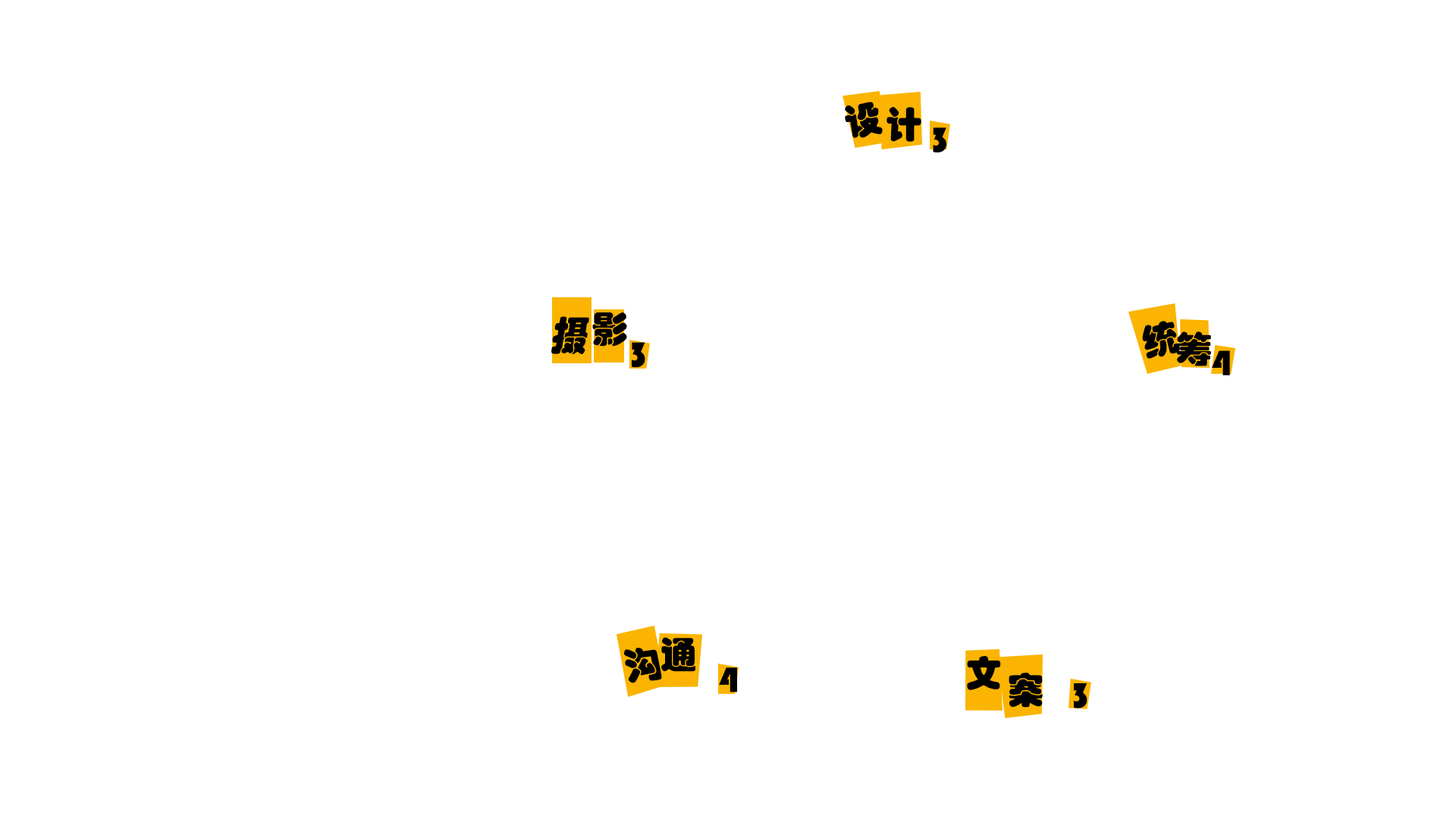
<style>
.page{position:relative;width:1456px;height:819px;background:#ffffff}
.page>*{position:absolute;margin:0}
.t1{font:36.4px "STHupo";color:#000000}
.t2{font:40.3px "STHupo";color:#000000;scale:0.9 1}
.t3{font:37px "STHupo";color:#000000}
</style>
<div class="page">
<p class="t1" style="left:845px;top:102px;width:38px;height:36px;rotate:-12deg">设</p>
<p class="t1" style="left:886px;top:107px;width:35px;height:35px">计</p>
<p class="t1" style="left:933px;top:127px;width:13px;height:25px">3</p>
<p class="t2" style="left:551px;top:316px;width:38px;height:39px">摄</p>
<p class="t1" style="left:592px;top:312px;width:35px;height:35px">影</p>
<p class="t1" style="left:1142px;top:321px;width:38px;height:38px;rotate:-14deg">统</p>
<p class="t1" style="left:1177px;top:331px;width:34px;height:35px">筹</p>
<p class="t1" style="left:632px;top:342px;width:13px;height:26px">3</p>
<p class="t1" style="left:1212px;top:350px;width:18px;height:25px">4</p>
<p class="t1" style="left:661px;top:637px;width:34px;height:35px">通</p>
<p class="t3" style="left:624px;top:648px;width:38px;height:35px;rotate:-8deg">沟</p>
<p class="t1" style="left:967px;top:656px;width:34px;height:34px">文</p>
<p class="t1" style="left:719px;top:667px;width:18px;height:25px">4</p>
<p class="t1" style="left:1009px;top:673px;width:34px;height:35px">案</p>
<p class="t1" style="left:1074px;top:683px;width:13px;height:25px">3</p>
</div>
